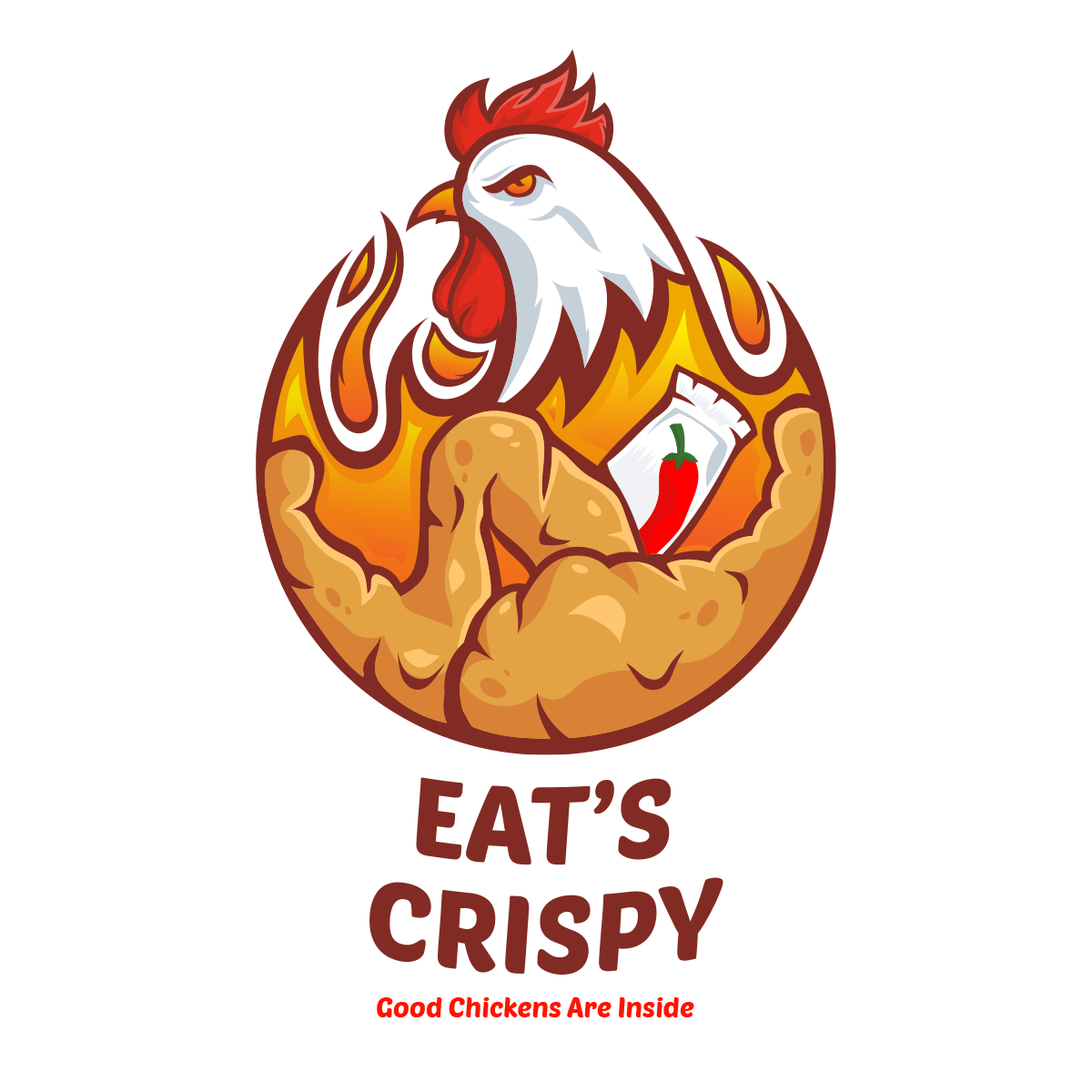
<style>
.page{position:relative;width:1092px;height:1092px;background:#ffffff}
.page>*{position:absolute;margin:0}
.t1{font:109.2px/109.2px "PoetsenOne-Regular";color:#822b24}
.t2{font:27.3px "PoetsenOne-Regular";color:#ff1300}
</style>
<div class="page">
<p class="t1" style="left:369px;top:777px;width:354px;height:198px;text-align:center">EAT’S<br>CRISPY</p>
<p class="t2" style="left:377px;top:997px;width:317px;height:20px">Good Chickens Are Inside</p>
</div>
